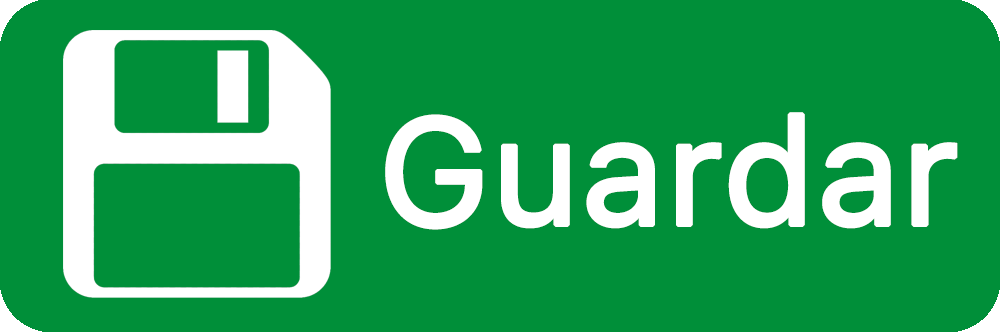
<style>
.page{position:relative;width:1000px;height:332px;background:#008f39}
.page>*{position:absolute;margin:0}
.t1{font:150px "SFProText-Regular";color:#ffffff;font-weight:bold}
</style>
<div class="page">
<p class="t1" style="left:385px;top:112px;width:573px;height:118px">Guardar</p>
</div>
